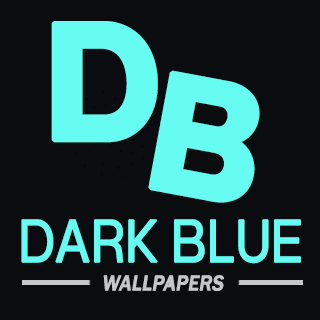
<style>
.page{position:relative;width:320px;height:320px;background:#0b0c10}
.page>*{position:absolute;margin:0}
.t1{font:179.4px "OverusedGrotesk-Bold";color:#66fcf1;font-variant:small-caps;font-weight:bold}
.t2{font:64px "OverusedGrotesk-Regular";color:#66fcf1;font-variant:small-caps;font-weight:bold;scale:0.89 1}
.t3{font:22.1px "FranklinGothic-Medium";color:#c5c6c7;font-variant:small-caps;font-weight:bold;font-style:italic;scale:0.88 1}
</style>
<div class="page">
<p class="t1" style="left:51px;top:21px;width:107px;height:122px">D</p>
<p class="t1" style="left:148px;top:70px;width:112px;height:133px;rotate:11deg">B</p>
<p class="t2" style="left:21px;top:219px;width:137px;height:44px">DARK</p>
<p class="t2" style="left:174px;top:219px;width:127px;height:45px">BLUE</p>
<p class="t3" style="left:103px;top:275px;width:121px;height:16px">WALLPAPERS</p>
</div>
